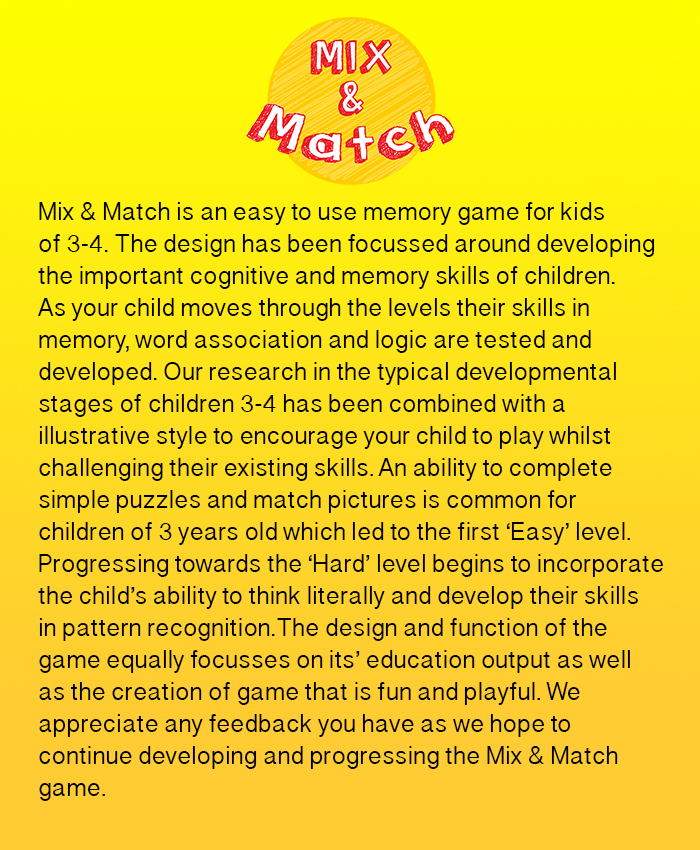
<style>
.page{position:relative;width:700px;height:850px}
.page>*{position:absolute;margin:0}
.t1{font:25px/32px "DevanagariSangamMN";letter-spacing:0.01em;color:#000000}
</style>
<div class="page">
<p class="t1" style="left:38px;top:202px;width:625px;height:599px">Mix &amp; Match is an easy to use memory game for kids <br>of 3-4. The design has been focussed around developing<br>the important cognitive and memory skills of children. <br>As your child moves through the levels their skills in <br>memory, word association and logic are tested and <br>developed. Our research in the typical developmental <br>stages of children 3-4 has been combined with a<br>illustrative style to encourage your child to play whilst <br>challenging their existing skills. An ability to complete <br>simple puzzles and match pictures is common for <br>children of 3 years old which led to the first ‘Easy’ level. <br>Progressing towards the ‘Hard’ level begins to incorporate<br>the child’s ability to think literally and develop their skills<br>in pattern recognition.The design and function of the <br>game equally focusses on its’ education output as well <br>as the creation of game that is fun and playful. We<br>appreciate any feedback you have as we hope to <br>continue developing and progressing the Mix &amp; Match<br>game.</p>
</div>
